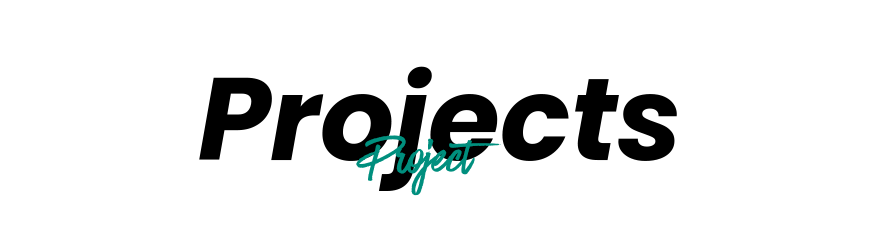
<style>
.page{position:relative;width:880px;height:239px;background:#ffffff}
.page>*{position:absolute;margin:0}
.t1{font:116.5px "Poppins-BoldItalic";color:#000000}
.t2{font:55.8px "HaveHeartOne";color:#008f7e}
</style>
<div class="page">
<p class="t1" style="left:199px;top:66px;width:478px;height:125px">Projects</p>
<p class="t2" style="left:356px;top:135px;width:145px;height:61px">Project</p>
</div>
